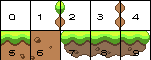
<style>
.page{position:relative;width:151px;height:60px;background:#ffffff}
.page>*{position:absolute;margin:0}
.t1{font:7.5px "ArialMT";color:#000000;scale:2 1}
</style>
<div class="page">
<p class="t1" style="left:9px;top:14px;width:130px;height:42px">0     1      2     3       4<br><br>5     6      7      8      9</p>
</div>
